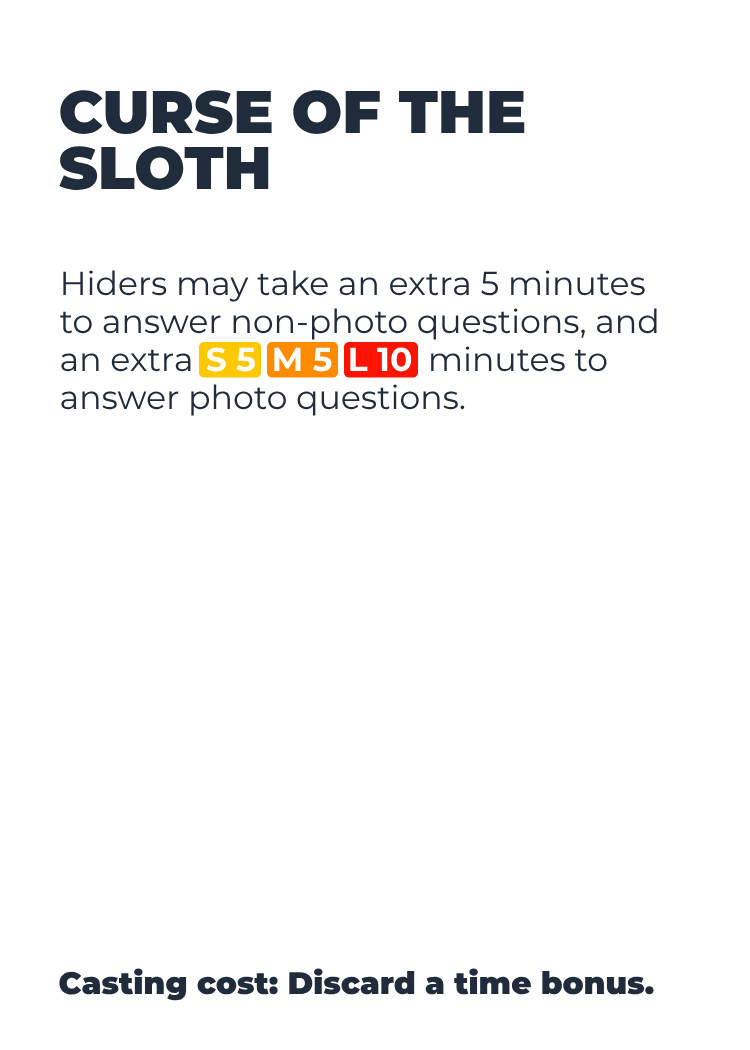
<style>
.page{position:relative;width:750px;height:1050px;background:#ffffff}
.page>*{position:absolute;margin:0}
.t1{font:59.8px/56.4px "Montserrat-Black";color:#202c3c}
.t2{font:33.1px/38px "Montserrat-Regular";color:#202c3c}
.t3{font:33.1px "Montserrat-Bold";color:#ffffff}
.t4{font:31.1px "Montserrat-Black";color:#202c3c}
</style>
<div class="page">
<p class="t1" style="left:59px;top:90px;width:466px;height:100px">CURSE OF THE<br>SLOTH</p>
<p class="t2" style="left:60px;top:270px;width:597px;height:146px">Hiders may take an extra 5 minutes<br>to answer non-photo questions, and<br>an extra                           minutes to<br>answer photo questions.</p>
<p class="t3" style="left:206px;top:347px;width:49px;height:25px">S 5</p>
<p class="t3" style="left:274px;top:347px;width:58px;height:25px">M 5</p>
<p class="t3" style="left:350px;top:347px;width:62px;height:25px">L 10</p>
<p class="t4" style="left:59px;top:968px;width:595px;height:33px">Casting cost: Discard a time bonus.</p>
</div>
